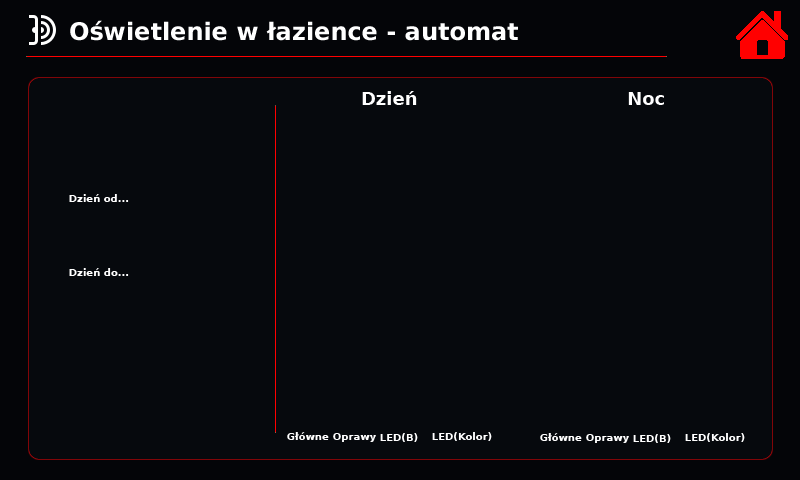
<style>
.page{position:relative;width:800px;height:480px;background:#06090d}
.page>*{position:absolute;margin:0}
.t1{font:24px "DejaVuSans-Bold";color:#ffffff}
.t2{font:18px "DejaVuSans-Bold";color:#ffffff}
.t3{font:10px "DejaVuSans-Bold";color:#ffffff}
</style>
<div class="page">
<p class="t1" style="left:70px;top:20px;width:448px;height:21px">Oświetlenie w łazience - automat</p>
<p class="t2" style="left:362px;top:91px;width:55px;height:14px">Dzień</p>
<p class="t2" style="left:628px;top:92px;width:36px;height:13px">Noc</p>
<p class="t3" style="left:69px;top:194px;width:60px;height:8px">Dzień od...</p>
<p class="t3" style="left:69px;top:268px;width:60px;height:8px">Dzień do...</p>
<p class="t3" style="left:287px;top:432px;width:42px;height:8px">Główne</p>
<p class="t3" style="left:333px;top:433px;width:43px;height:9px">Oprawy</p>
<p class="t3" style="left:380px;top:433px;width:38px;height:9px">LED(B)</p>
<p class="t3" style="left:432px;top:432px;width:60px;height:9px">LED(Kolor)</p>
<p class="t3" style="left:540px;top:433px;width:42px;height:8px">Główne</p>
<p class="t3" style="left:586px;top:434px;width:43px;height:9px">Oprawy</p>
<p class="t3" style="left:633px;top:434px;width:38px;height:9px">LED(B)</p>
<p class="t3" style="left:685px;top:433px;width:60px;height:9px">LED(Kolor)</p>
</div>
